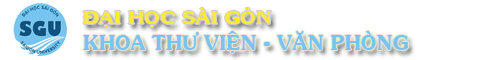
<style>
.page{position:relative;width:500px;height:60px;background:#ffffff}
.page>*{position:absolute;margin:0}
.t1{font:17px "VNI-Souvir-Bold";color:#ffea3b;scale:1.17 1}
.t2{font:20px "VNI-Souvir-Bold";color:#76c4ef}
</style>
<div class="page">
<p class="t1" style="left:83px;top:8px;width:189px;height:19px">ÑAÏI HOÏC SAØI GOØN</p>
<p class="t2" style="left:83px;top:31px;width:325px;height:22px">KHOA THÖ VIEÄN - VAÊN PHOØNG</p>
</div>
